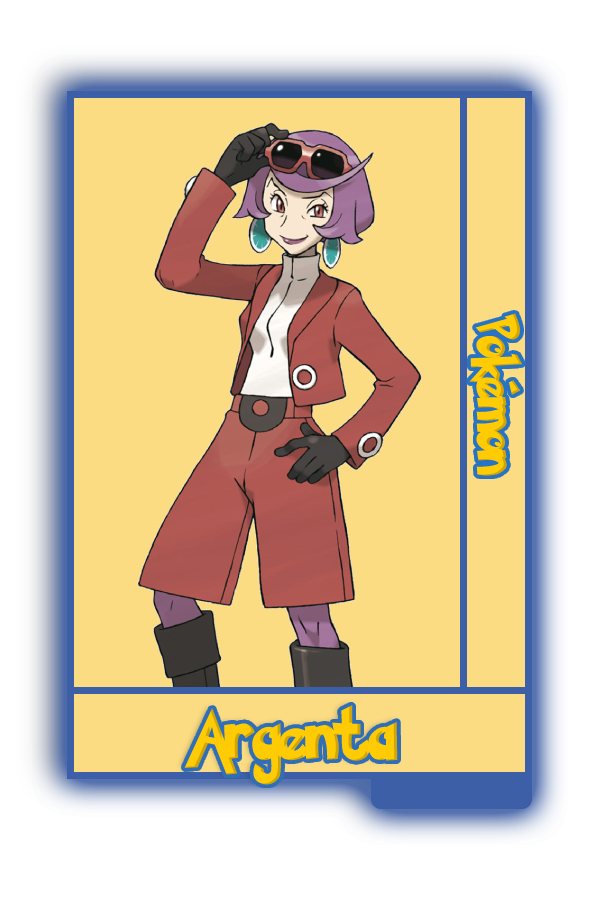
<style>
.page{position:relative;width:600px;height:900px;background:#fbdc83}
.page>*{position:absolute;margin:0}
.t1{font:48.8px "PokemonSolidNormal";color:#ffcb05;scale:0.8 1}
.t2{font:56.6px "PokemonSolidNormal";color:#ffcb05;scale:0.92 1}
</style>
<div class="page">
<p class="t1" style="left:469px;top:313px;width:54px;height:163px;rotate:90deg">Pokémon</p>
<p class="t2" style="left:184px;top:705px;width:214px;height:80px">Argenta</p>
</div>
